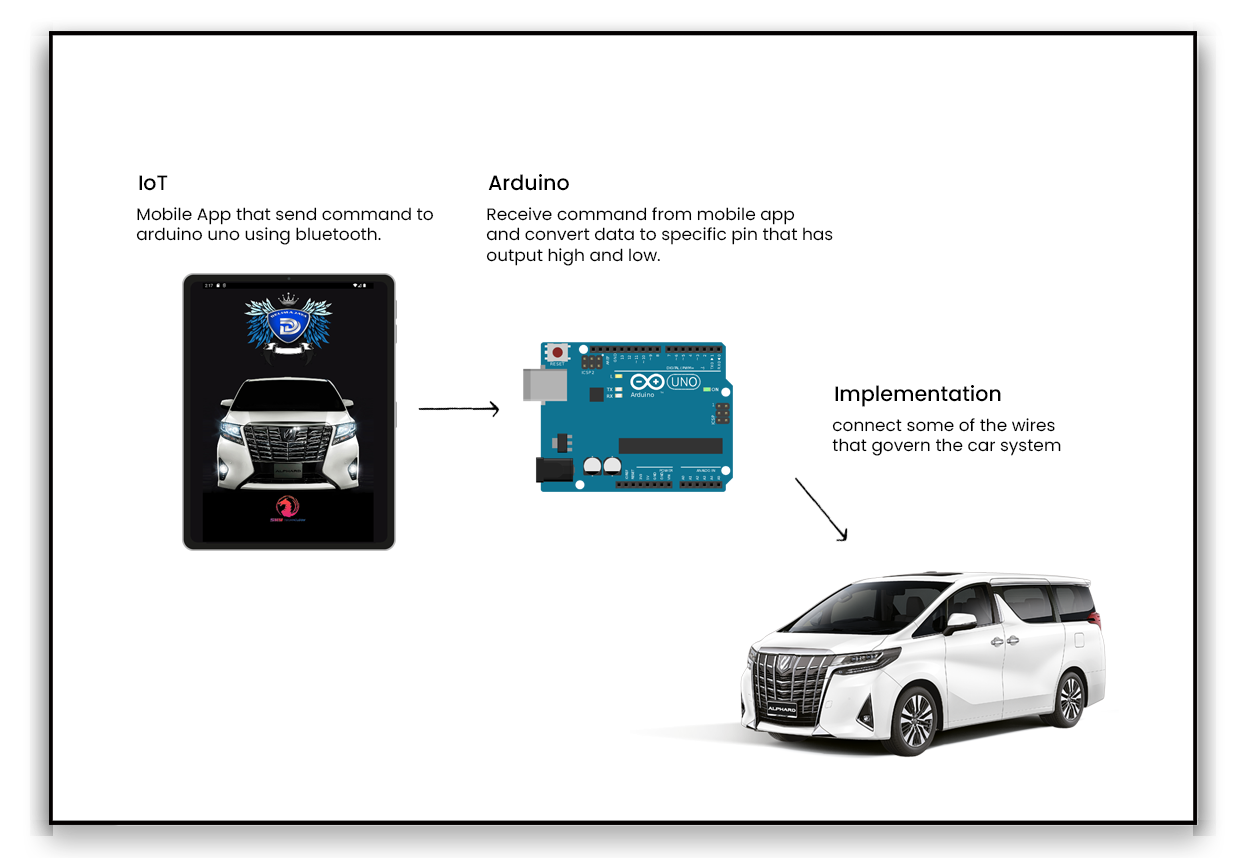
<style>
.page{position:relative;width:1248px;height:858px;background:#ffffff}
.page>*{position:absolute;margin:0}
.t1{font:20.8px "Poppins-Medium";color:#000000}
.t2{font:16.7px "Poppins-Regular";color:#000000}
.t3{font:20.9px "Poppins-Medium";color:#000000}
</style>
<div class="page">
<p class="t1" style="left:488px;top:174px;width:81px;height:17px">Arduino</p>
<p class="t1" style="left:139px;top:175px;width:29px;height:16px">IoT</p>
<p class="t2" style="left:136px;top:207px;width:298px;height:38px">Mobile App that send command to<br>arduino uno using bluetooth.</p>
<p class="t2" style="left:486px;top:207px;width:347px;height:59px">Receive command from mobile app<br>and convert data to specific pin that has<br>output high and low.</p>
<p class="t3" style="left:835px;top:385px;width:166px;height:22px">Implementation</p>
<p class="t2" style="left:832px;top:418px;width:229px;height:38px">connect some of the wires <br>that govern the car system</p>
</div>
